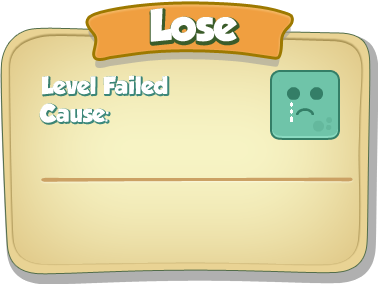
<style>
.page{position:relative;width:378px;height:284px}
.page>*{position:absolute;margin:0}
.t1{font:40px "GROBOLD";color:#ffffff}
.t2{font:22px "GROBOLD";color:#ffffff}
</style>
<div class="page">
<p class="t1" style="left:150px;top:8px;width:87px;height:34px">Lose</p>
<p class="t2" style="left:42px;top:75px;width:126px;height:20px">Level Failed</p>
<p class="t2" style="left:39px;top:103px;width:70px;height:20px">Cause:</p>
</div>
